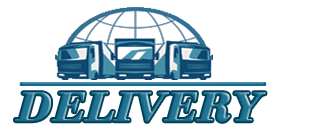
<style>
.page{position:relative;width:322px;height:127px;background:#ffffff}
.page>*{position:absolute;margin:0}
.t1{font:39.4px "ABodoniNovaBoldItalic";color:#217493;font-weight:bold;scale:1.1 1}
</style>
<div class="page">
<p class="t1" style="left:15px;top:92px;width:251px;height:30px">DELIVERY</p>
</div>
